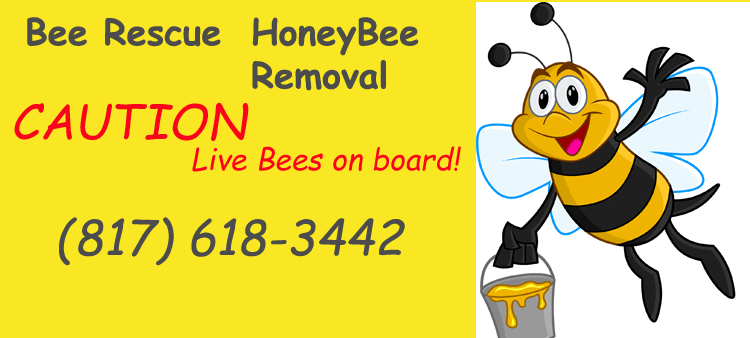
<style>
.page{position:relative;width:750px;height:338px;background:#fae723}
.page>*{position:absolute;margin:0}
.t1{font:36px "ComicSansMS-Bold";color:#4c4c4c}
.t2{font:48px "ComicSansMS-Italic";color:#fb041b}
.t3{font:30px "ComicSansMS-Italic";color:#fb041b}
.t4{font:48px "ComicSansMS-Italic";color:#4c4c4c}
</style>
<div class="page">
<p class="t1" style="left:27px;top:17px;width:194px;height:30px">Bee Rescue</p>
<p class="t1" style="left:252px;top:17px;width:167px;height:74px">HoneyBee<br>Removal</p>
<p class="t2" style="left:14px;top:102px;width:235px;height:39px">CAUTION</p>
<p class="t3" style="left:192px;top:146px;width:269px;height:26px">Live Bees on board!</p>
<p class="t4" style="left:59px;top:217px;width:346px;height:49px">(817) 618-3442</p>
</div>
